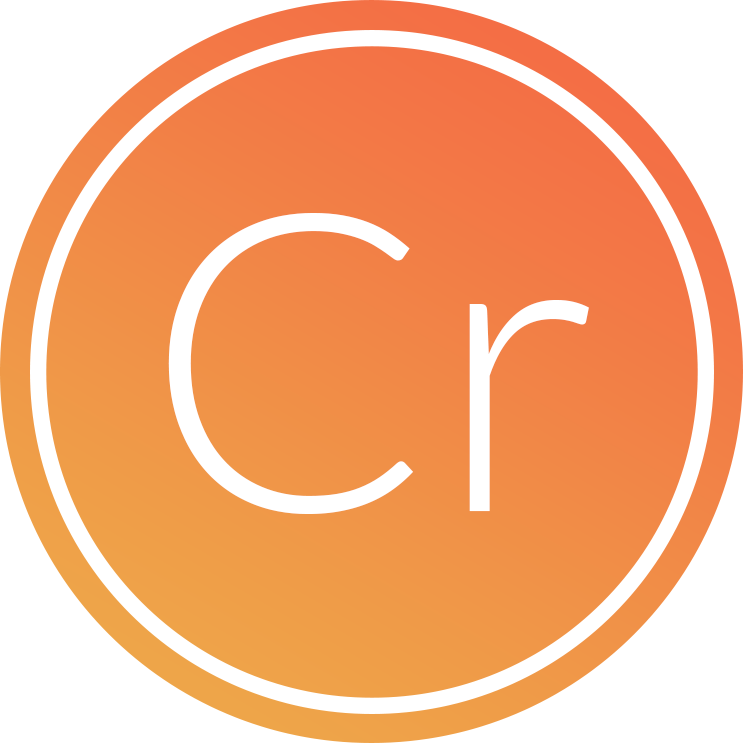
<style>
.page{position:relative;width:743px;height:743px;background:#ffffff}
.page>*{position:absolute;margin:0}
.t1{font:416.7px "Lato-Light";color:#ffffff}
</style>
<div class="page">
<p class="t1" style="left:168px;top:213px;width:421px;height:301px">Cr</p>
</div>
